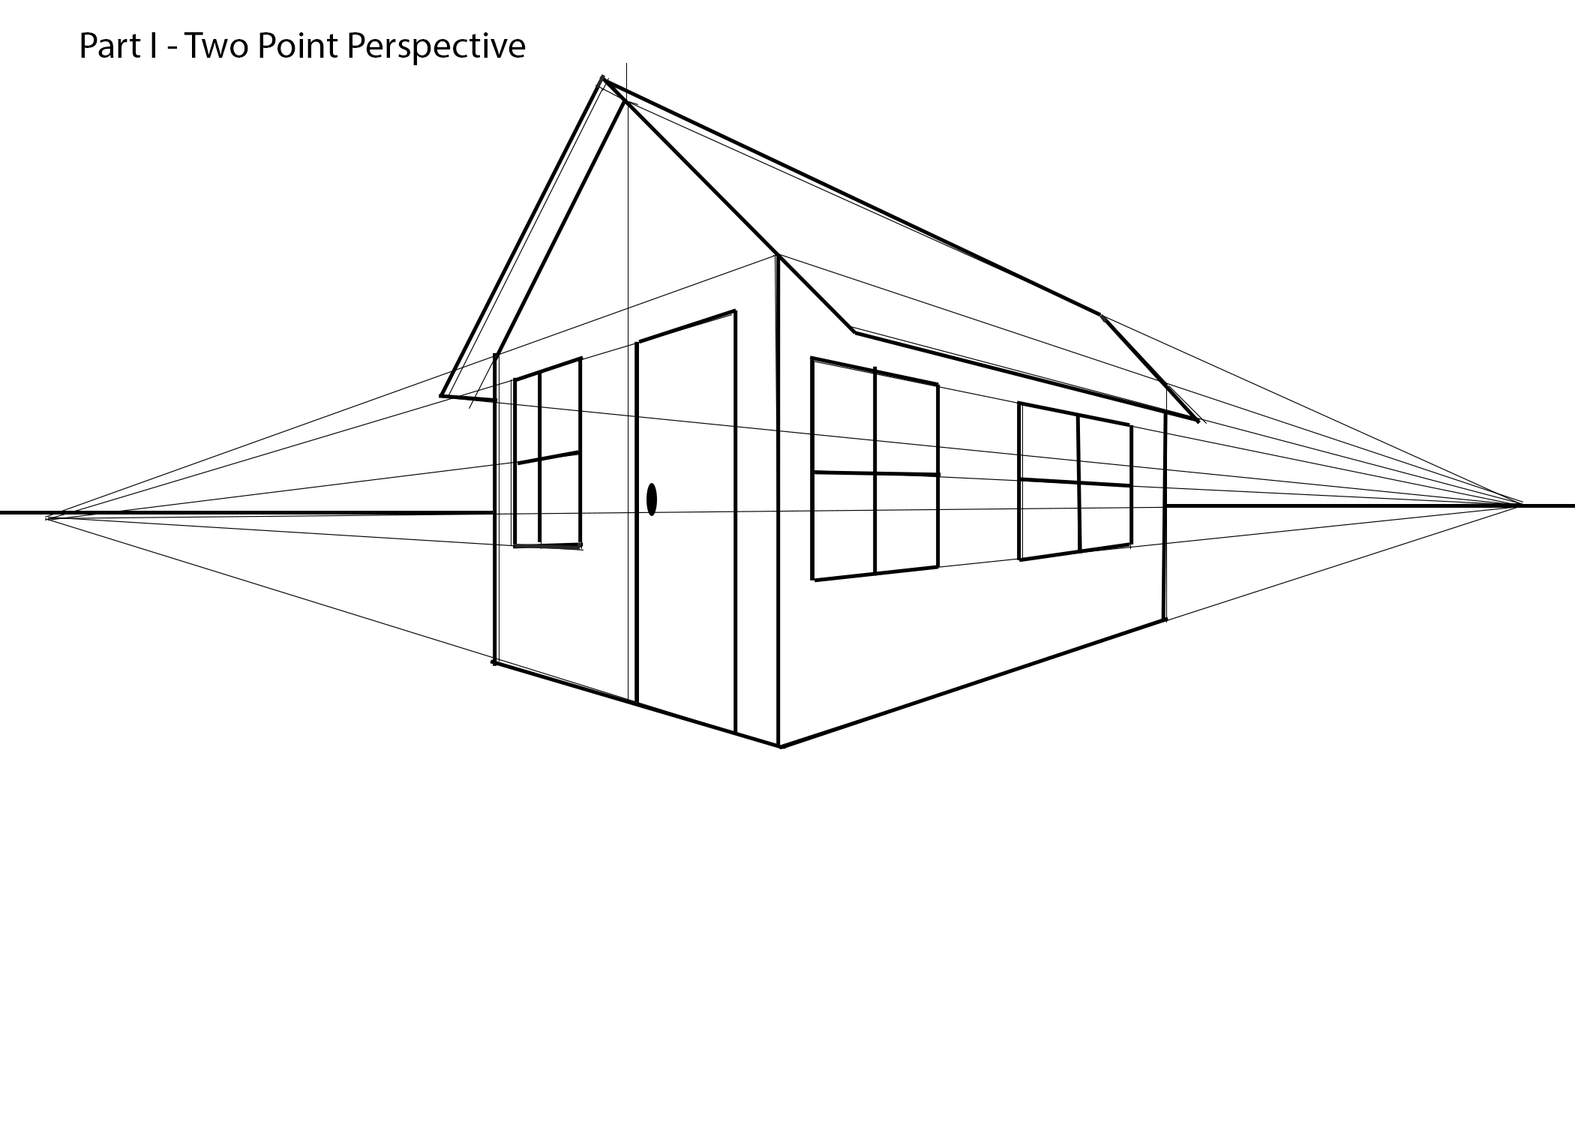
<style>
.page{position:relative;width:1575px;height:1125px;background:#ffffff}
.page>*{position:absolute;margin:0}
.t1{font:9px "MyriadPro-Regular";color:#000000}
</style>
<div class="page">
<p class="t1" style="left:81px;top:32px;width:445px;height:33px">Part I - Two Point Perspective</p>
</div>
